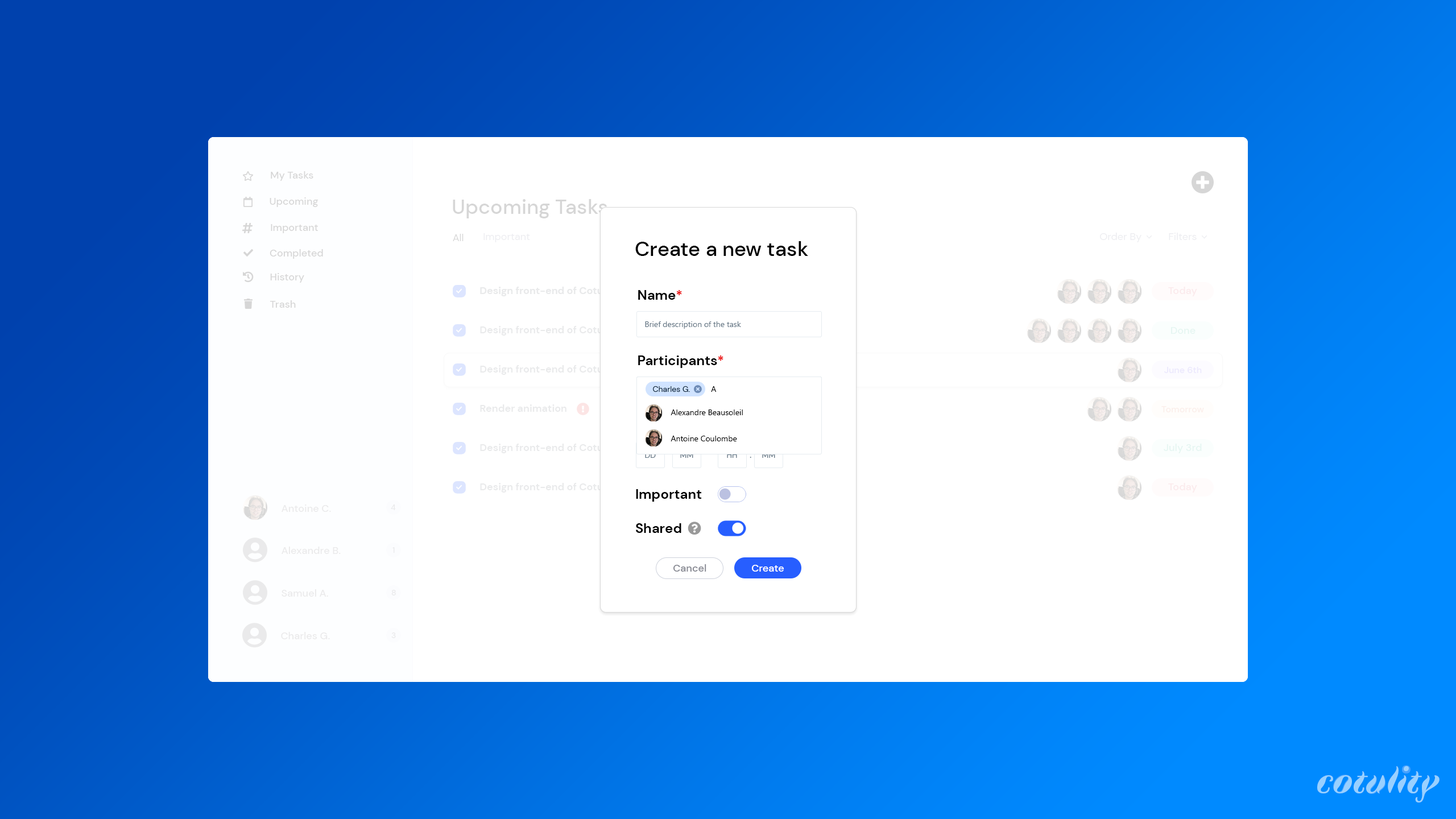
<style>
.page{position:relative;width:1456px;height:819px;background:#ffffff}
.page>*{position:absolute;margin:0}
.t1{font:10.2px "DMSans-Medium";color:#d6d6d6}
.t2{font:20.5px "DMSans-Medium";color:#d6d6d6}
.t3{font:10.2px "DMSans-Regular";color:#d6d6d6}
.t4{font:10.2px "DMSans-Regular";color:#ededf1}
.t5{font:20.5px "DMSans-Medium";color:#000000}
.t6{font:10.2px "DMSans-Bold";color:#e9eaeb}
.t7{font:13.6px "DMSans-Bold";color:#000000}
.t8{font:13.6px "DMSans-Bold";color:#ea0000}
.t9{font:10.2px "DMSans-Medium";color:#fbeaec}
.t10{font:8px "SegoeUI";color:#657786}
.t11{font:10.2px "DMSans-Medium";color:#e6f6f2}
.t12{font:9.1px "DMSans-Medium";color:#ece9fd}
.t13{font:8px "DMSans-Regular";color:#062137}
.t14{font:8px "SegoeUI";color:#000101}
.t15{font:8px/26.2px "SegoeUI";color:#000000}
.t16{font:9.1px "DMSans-Medium";color:#fbefeb}
.t17{font:8px "DMSans-Regular"}
.t18{font:8px "DMSans-Regular";color:#657786}
.t19{font:10.2px "SegoeUI"}
.t20{font:10.2px "DMSans-Medium";color:#eaeaeb}
.t21{font:8px "DMSans-Medium";color:#e9eaeb}
.t22{font:10.2px "DMSans-Medium";color:#888a93}
.t23{font:10.2px "DMSans-Medium";color:#ffffff}
.t24{font:36.9px "Faune-DisplayBoldItalic";color:#99d0ff}
.t25{font:16.6px "Faune-DisplayBlack"}
</style>
<div class="page">
<p class="t1" style="left:271px;top:171px;width:42px;height:10px">My Tasks</p>
<p class="t1" style="left:270px;top:197px;width:48px;height:10px">Upcoming</p>
<p class="t2" style="left:453px;top:199px;width:154px;height:19px">Upcoming Tasks</p>
<p class="t1" style="left:271px;top:224px;width:47px;height:9px">Important</p>
<p class="t3" style="left:453px;top:234px;width:11px;height:7px">All</p>
<p class="t4" style="left:483px;top:233px;width:47px;height:9px">Important</p>
<p class="t4" style="left:1100px;top:233px;width:41px;height:9px">Order By</p>
<p class="t4" style="left:1169px;top:233px;width:28px;height:7px">Filters</p>
<p class="t5" style="left:635px;top:241px;width:173px;height:15px">Create a new task</p>
<p class="t4" style="left:1147px;top:235px;width:5px;height:4px;rotate:90deg">&gt;</p>
<p class="t4" style="left:1202px;top:235px;width:5px;height:4px;rotate:90deg">&gt;</p>
<p class="t1" style="left:270px;top:249px;width:53px;height:10px">Completed</p>
<p class="t1" style="left:270px;top:273px;width:34px;height:10px">History</p>
<p class="t6" style="left:480px;top:287px;width:139px;height:9px">Design front-end of Cotulity</p>
<p class="t6" style="left:480px;top:287px;width:139px;height:9px">Design front-end of Cotulity</p>
<p class="t7" style="left:638px;top:290px;width:44px;height:10px">Name<span class="t8">*</span></p>
<p class="t7" style="left:638px;top:290px;width:44px;height:10px">Name<span class="t8">*</span></p>
<p class="t9" style="left:1168px;top:287px;width:29px;height:9px">Today</p>
<p class="t9" style="left:1168px;top:287px;width:29px;height:9px">Today</p>
<p class="t1" style="left:270px;top:300px;width:26px;height:8px">Trash</p>
<p class="t6" style="left:480px;top:326px;width:139px;height:10px">Design front-end of Cotulity</p>
<p class="t10" style="left:645px;top:321px;width:96px;height:8px">Brief description of the task</p>
<p class="t11" style="left:1170px;top:327px;width:25px;height:7px">Done</p>
<p class="t6" style="left:480px;top:365px;width:139px;height:10px">Design front-end of Cotulity</p>
<p class="t7" style="left:638px;top:355px;width:85px;height:13px">Participants<span class="t8">*</span></p>
<p class="t7" style="left:638px;top:355px;width:85px;height:13px">Participants<span class="t8">*</span></p>
<p class="t12" style="left:1164px;top:367px;width:38px;height:6px">June 6th</p>
<p class="t13" style="left:653px;top:386px;width:37px;height:6px">Charles G.</p>
<p class="t14" style="left:711px;top:386px;width:6px;height:6px">A</p>
<p class="t6" style="left:480px;top:404px;width:86px;height:8px">Render animation</p>
<p class="t15" style="left:671px;top:409px;width:72px;height:32px">Alexandre Beausoleil<br>Antoine Coulombe</p>
<p class="t16" style="left:1161px;top:406px;width:43px;height:6px">Tomorrow</p>
<p class="t6" style="left:480px;top:444px;width:139px;height:9px">Design front-end of Cotulity</p>
<p class="t11" style="left:1164px;top:444px;width:38px;height:9px">July 3rd</p>
<p class="t17" style="left:645px;top:452px;width:11px;height:6px">DD</p>
<p class="t17" style="left:680px;top:452px;width:13px;height:6px">MM</p>
<p class="t18" style="left:727px;top:452px;width:10px;height:6px">HH</p>
<p class="t18" style="left:727px;top:452px;width:10px;height:6px">HH</p>
<p class="t19" style="left:750px;top:453px;width:1px;height:5px">:</p>
<p class="t19" style="left:750px;top:453px;width:1px;height:5px">:</p>
<p class="t17" style="left:762px;top:452px;width:13px;height:6px">MM</p>
<p class="t17" style="left:762px;top:452px;width:13px;height:6px">MM</p>
<p class="t6" style="left:480px;top:483px;width:139px;height:10px">Design front-end of Cotulity</p>
<p class="t9" style="left:1168px;top:483px;width:29px;height:10px">Today</p>
<p class="t7" style="left:636px;top:489px;width:65px;height:13px">Important</p>
<p class="t7" style="left:636px;top:489px;width:65px;height:13px">Important</p>
<p class="t20" style="left:282px;top:504px;width:49px;height:8px">Antoine C.</p>
<p class="t21" style="left:391px;top:504px;width:5px;height:6px">4</p>
<p class="t7" style="left:636px;top:523px;width:45px;height:10px">Shared</p>
<p class="t7" style="left:636px;top:523px;width:45px;height:10px">Shared</p>
<p class="t20" style="left:282px;top:547px;width:59px;height:7px">Alexandre B.</p>
<p class="t21" style="left:392px;top:547px;width:3px;height:6px">1</p>
<p class="t22" style="left:673px;top:564px;width:33px;height:8px">Cancel</p>
<p class="t23" style="left:752px;top:565px;width:32px;height:7px">Create</p>
<p class="t20" style="left:282px;top:589px;width:46px;height:8px">Samuel A.</p>
<p class="t21" style="left:391px;top:590px;width:5px;height:5px">8</p>
<p class="t20" style="left:281px;top:632px;width:49px;height:7px">Charles G.</p>
<p class="t21" style="left:391px;top:632px;width:5px;height:6px">3</p>
<p class="t24" style="left:1317px;top:766px;width:122px;height:36px">cotulity</p>
<p class="t25" style="left:1402px;top:765px;width:8px;height:8px;rotate:90deg">o</p>
<p class="t24" style="left:1407px;top:771px;width:14px;height:22px">t</p>
<p class="t24" style="left:1333px;top:775px;width:18px;height:18px">o</p>
<p class="t24" style="left:1367px;top:776px;width:19px;height:18px">u</p>
</div>
